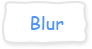
<style>
.page{position:relative;width:92px;height:49px;background:#ffffff}
.page>*{position:absolute;margin:0}
.t1{font:18px "ComicSansMS";color:#4f95ff}
</style>
<div class="page">
<p class="t1" style="left:31px;top:16px;width:33px;height:14px">Blur</p>
</div>
